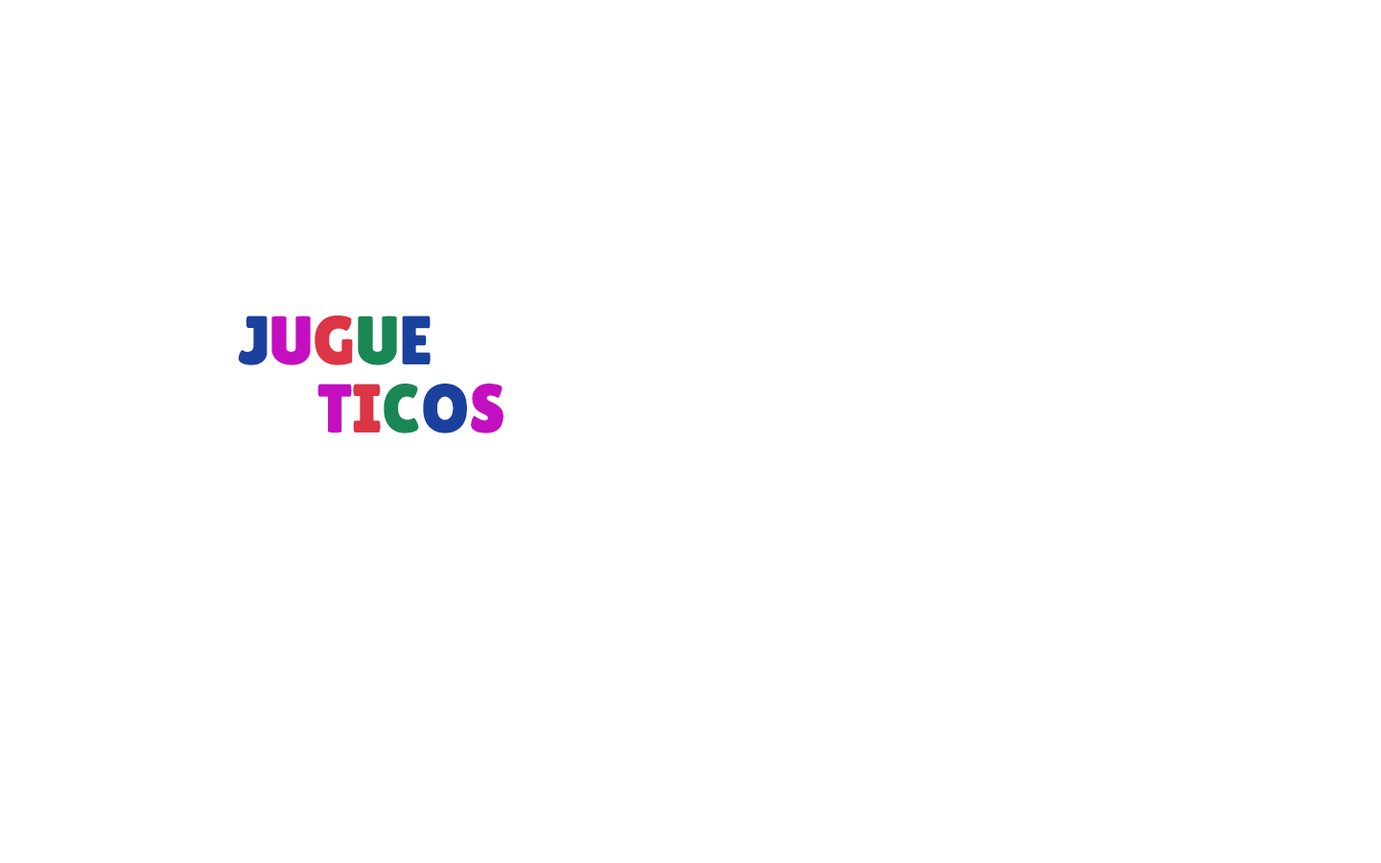
<style>
.page{position:relative;width:1381px;height:863px;background:#ffffff}
.page>*{position:absolute;margin:0}
.t1{font:69.1px "LilitaOne";color:#1a419e}
.t2{font:69.1px "LilitaOne";color:#c40fc1}
.t3{font:69.1px "LilitaOne";color:#dc3545}
.t4{font:69.1px "LilitaOne";color:#198754}
</style>
<div class="page">
<p class="t1" style="left:238px;top:316px;width:193px;height:49px">J<span class="t2">U</span><span class="t3">G</span><span class="t4">U</span>E</p>
<p class="t2" style="left:317px;top:384px;width:187px;height:50px">T<span class="t3">I</span><span class="t4">C</span><span class="t1">O</span>S</p>
</div>
